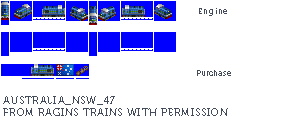
<style>
.page{position:relative;width:289px;height:124px;background:#ffffff}
.page>*{position:absolute;margin:0}
.t1{font:8px "Museo700-Regular";letter-spacing:0.075em;color:#444c5c}
.t2{font:8px "Museo700-Regular";color:#444c5c}
.t3{font:10px "Museo700-Regular";letter-spacing:0.075em;color:#444c5c;text-transform:uppercase}
</style>
<div class="page">
<p class="t1" style="left:199px;top:8px;width:28px;height:8px">Engine</p>
<p class="t2" style="left:197px;top:70px;width:34px;height:6px">Purchase</p>
<p class="t3" style="left:3px;top:96px;width:225px;height:20px">Australia_NSW_47<br>from ragins trains with permission</p>
</div>
